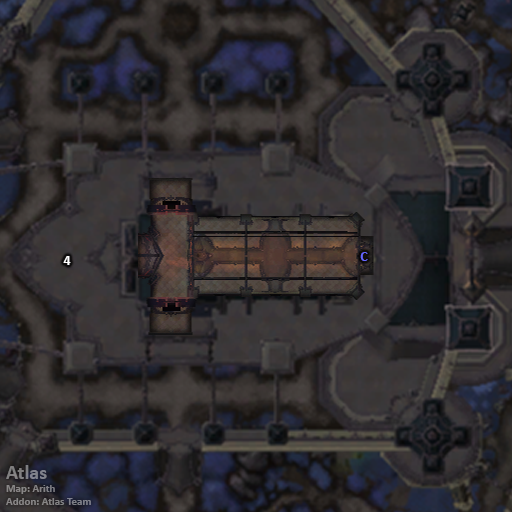
<style>
.page{position:relative;width:512px;height:512px}
.page>*{position:absolute;margin:0}
.t1{font:14px "Calibri-Bold";color:#ffffff}
.t2{font:14px "Calibri-Bold";color:#6666ff}
.t3{font:11px "Calibri-Bold";color:#808186}
.t4{font:20px "Calibri-Bold";color:#808186}
</style>
<div class="page">
<p class="t1" style="left:63px;top:256px;width:8px;height:9px">4</p>
<p class="t2" style="left:360px;top:252px;width:8px;height:9px">C</p>
<p class="t3" style="left:6px;top:465px;width:85px;height:40px"><span class="t4">Atlas<br></span>Map: Arith<br>Addon: Atlas Team</p>
</div>
